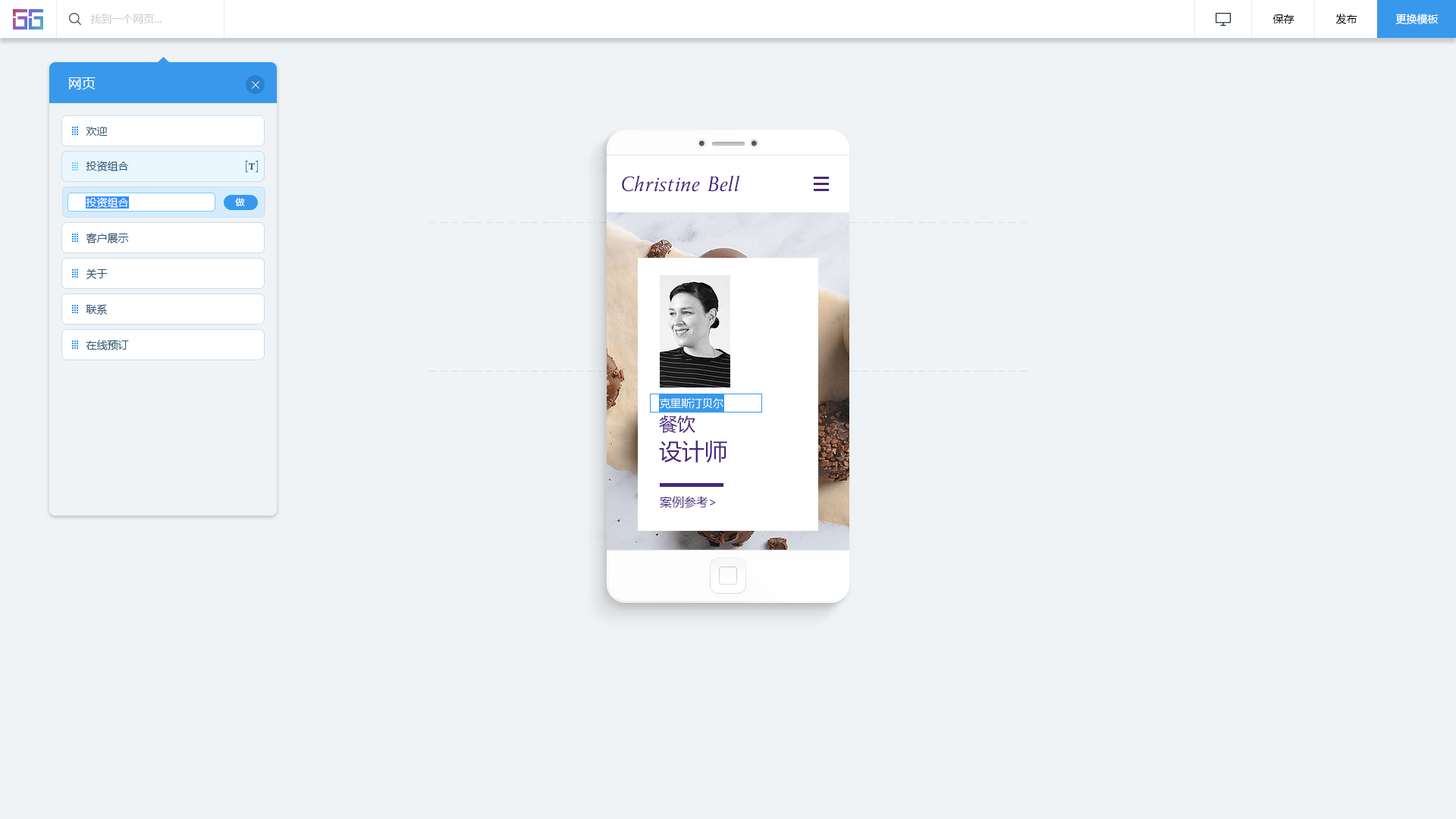
<style>
.page{position:relative;width:1456px;height:819px;background:#f0f3f5}
.page>*{position:absolute;margin:0}
.t1{font:10.6px "MicrosoftYaHei";color:#cccccc}
.t2{font:10.6px "MicrosoftYaHei";color:#000000}
.t3{font:10.6px "MicrosoftYaHei";color:#ffffff}
.t4{font:13.6px "MicrosoftYaHei";color:#ffffff}
.t5{font:10.6px "MicrosoftYaHei";color:#2b5672}
.t6{font:22.7px "Anziano-Italic";color:#48277c}
.t7{font:9.1px "MicrosoftYaHei";color:#ffffff}
.t8{font:18.2px "MicrosoftYaHei";color:#48277c}
.t9{font:22.7px "MicrosoftYaHei";color:#48277c}
.t10{font:12.1px "MicrosoftYaHei";color:#48277c}
</style>
<div class="page">
<p class="t1" style="left:90px;top:14px;width:72px;height:10px">找到一个网页...</p>
<p class="t2" style="left:1272px;top:14px;width:22px;height:10px">保存</p>
<p class="t2" style="left:1335px;top:14px;width:22px;height:10px">发布</p>
<p class="t3" style="left:1395px;top:14px;width:44px;height:10px">更换模板</p>
<p class="t4" style="left:69px;top:77px;width:27px;height:12px">网页</p>
<p class="t5" style="left:86px;top:127px;width:22px;height:9px">欢迎</p>
<p class="t5" style="left:86px;top:161px;width:43px;height:10px">投资组合</p>
<p class="t6" style="left:622px;top:175px;width:118px;height:17px">Christine Bell</p>
<p class="t3" style="left:86px;top:197px;width:43px;height:11px">投资组合</p>
<p class="t7" style="left:235px;top:198px;width:10px;height:8px">做</p>
<p class="t5" style="left:86px;top:233px;width:43px;height:10px">客户展示</p>
<p class="t5" style="left:86px;top:268px;width:22px;height:11px">关于</p>
<p class="t5" style="left:86px;top:304px;width:21px;height:11px">联系</p>
<p class="t5" style="left:86px;top:340px;width:43px;height:10px">在线预订</p>
<p class="t3" style="left:660px;top:398px;width:63px;height:11px">克里斯汀贝尔</p>
<p class="t8" style="left:659px;top:415px;width:36px;height:18px">餐饮</p>
<p class="t9" style="left:659px;top:441px;width:68px;height:22px">设计师</p>
<p class="t10" style="left:660px;top:496px;width:56px;height:12px">案例参考&gt;</p>
</div>
